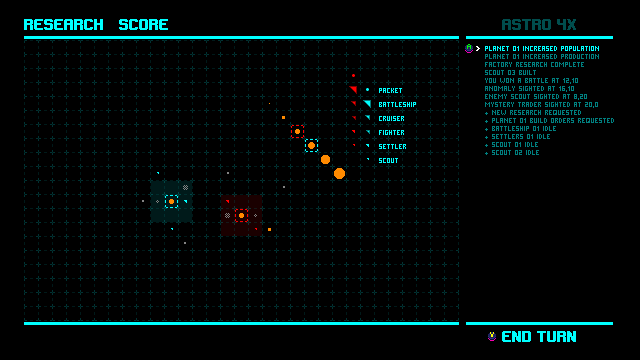
<style>
.page{position:relative;width:640px;height:360px;background:#000000}
.page>*{position:absolute;margin:0}
.t1{font:12px "Gameplay";color:#00ffff;text-transform:uppercase;font-weight:bold}
.t2{font:12px "Gameplay";color:#004d4d;text-transform:uppercase;font-weight:bold}
.t3{font:8px/8px "PixelMillennium";color:#007f7f;text-transform:uppercase}
.t4{font:8px/8px "PixelMillennium";color:#00ffff;text-transform:uppercase}
.t5{font:8px/14px "PixelMillennium";color:#00ffff;text-transform:uppercase}
</style>
<div class="page">
<p class="t1" style="left:24px;top:19px;width:79px;height:11px">research</p>
<p class="t1" style="left:119px;top:19px;width:49px;height:11px">score</p>
<p class="t2" style="left:502px;top:19px;width:74px;height:11px">astro 4x</p>
<p class="t3" style="left:485px;top:46px;width:129px;height:109px"><span class="t4">planet 01 increased population<br></span>planet 01 increased production<br>factory research complete<br>scout 03 built<br>you won a battle at 12,10<br>anomaly sighted at 16,10<br>enemy scout sighted at 8,20<br>mystery trader sighted at 20,0<br>+ new research requested<br>+ planet 01 build orders requested<br>+ battleship 01 idle<br>+ settlers 01 idle<br>+ scout 01 idle<br>+ scout 02 idle</p>
<p class="t5" style="left:379px;top:88px;width:37px;height:75px">packet<br>battleship<br>cruiser<br>fighter<br>settler<br>scout</p>
<p class="t1" style="left:502px;top:331px;width:74px;height:11px">end turn</p>
</div>
